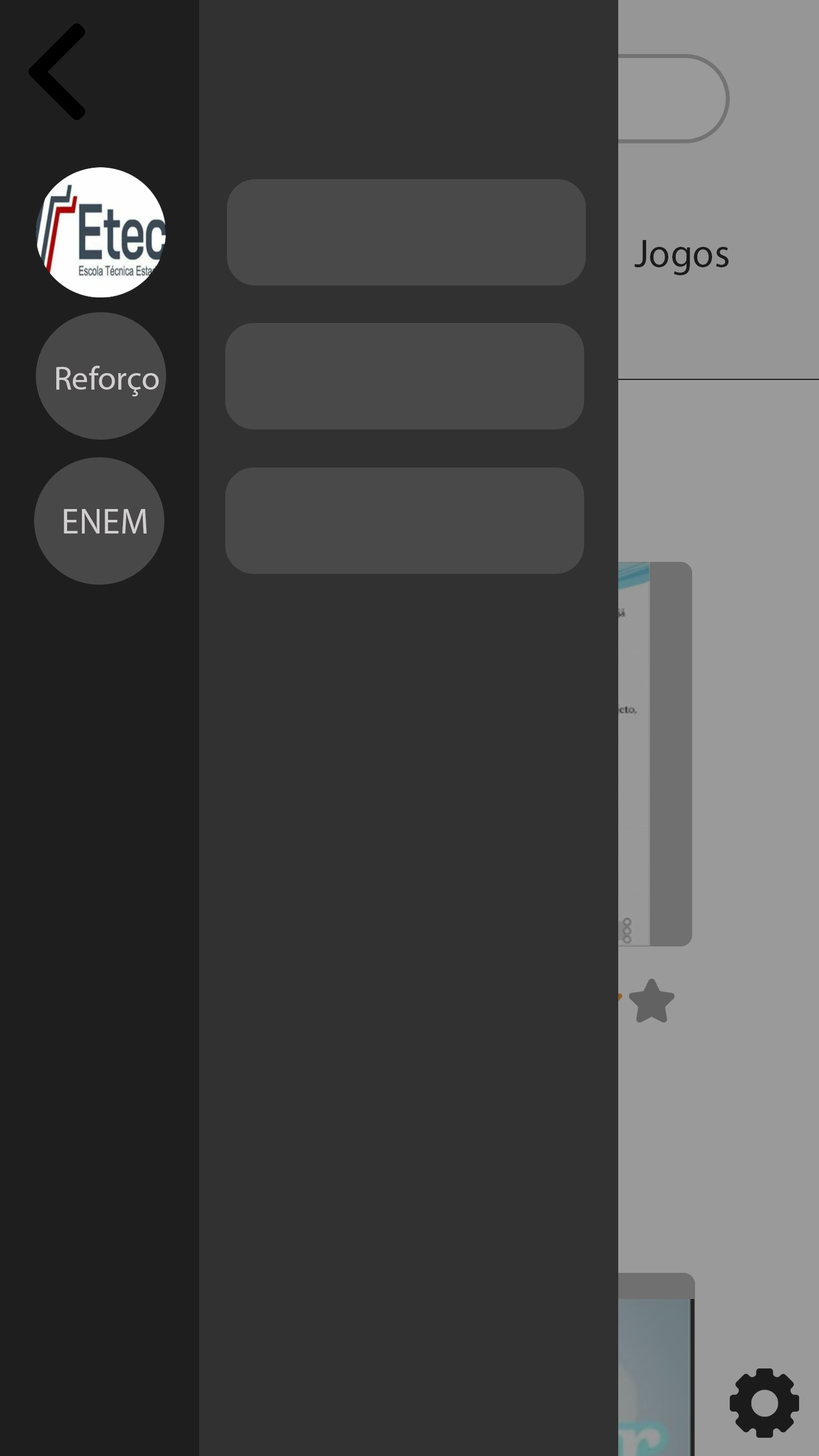
<style>
.page{position:relative;width:819px;height:1456px;background:#323131}
.page>*{position:absolute;margin:0}
.t1{font:39.5px "MyriadPro-Regular";color:#1b1b1b}
.t2{font:33.3px "MyriadPro-Regular";color:#d0cece}
.t3{font:35.4px "MyriadPro-Regular";color:#d0cece}
</style>
<div class="page">
<p class="t1" style="left:634px;top:240px;width:95px;height:35px">Jogos</p>
<p class="t2" style="left:56px;top:366px;width:103px;height:30px">Reforço</p>
<p class="t3" style="left:64px;top:509px;width:83px;height:24px">ENEM</p>
</div>
